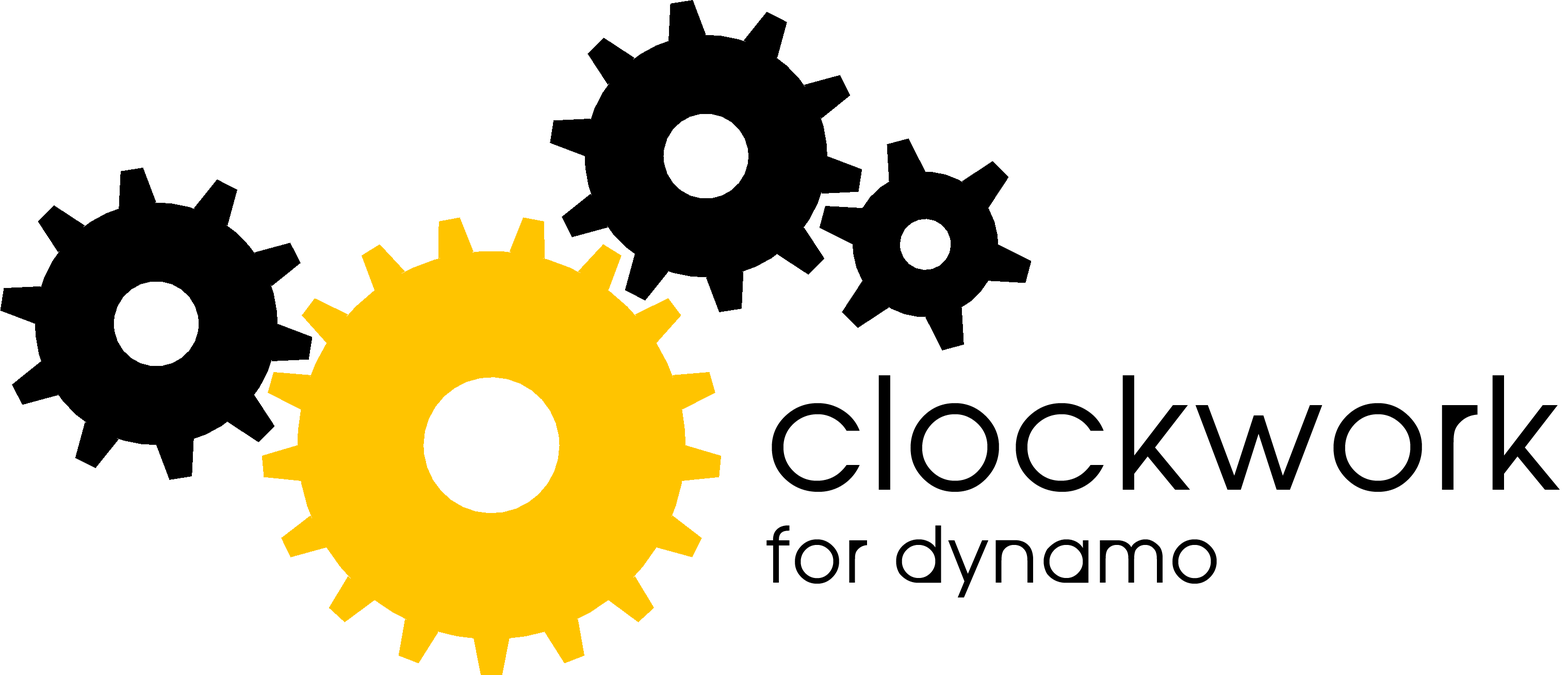
<style>
.page{position:relative;width:1568px;height:675px;background:#ffffff}
.page>*{position:absolute;margin:0}
.t1{font:77.4px "SeraphicOrganism";letter-spacing:0.025em;color:#000000}
.t2{font:154.7px "SeraphicOrganism";letter-spacing:0.025em;color:#000000}
</style>
<div class="page">
<p class="t1" style="left:766px;top:375px;width:794px;height:222px"><span class="t2">Clockwork <br></span>for Dynamo</p>
</div>
